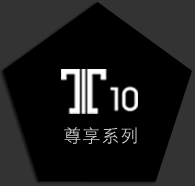
<style>
.page{position:relative;width:195px;height:186px;background:#000000}
.page>*{position:absolute;margin:0}
.t1{font:18px "STXihei";letter-spacing:0.05em;color:#cfd0d0}
</style>
<div class="page">
<p class="t1" style="left:64px;top:127px;width:73px;height:17px">尊享系列</p>
</div>
